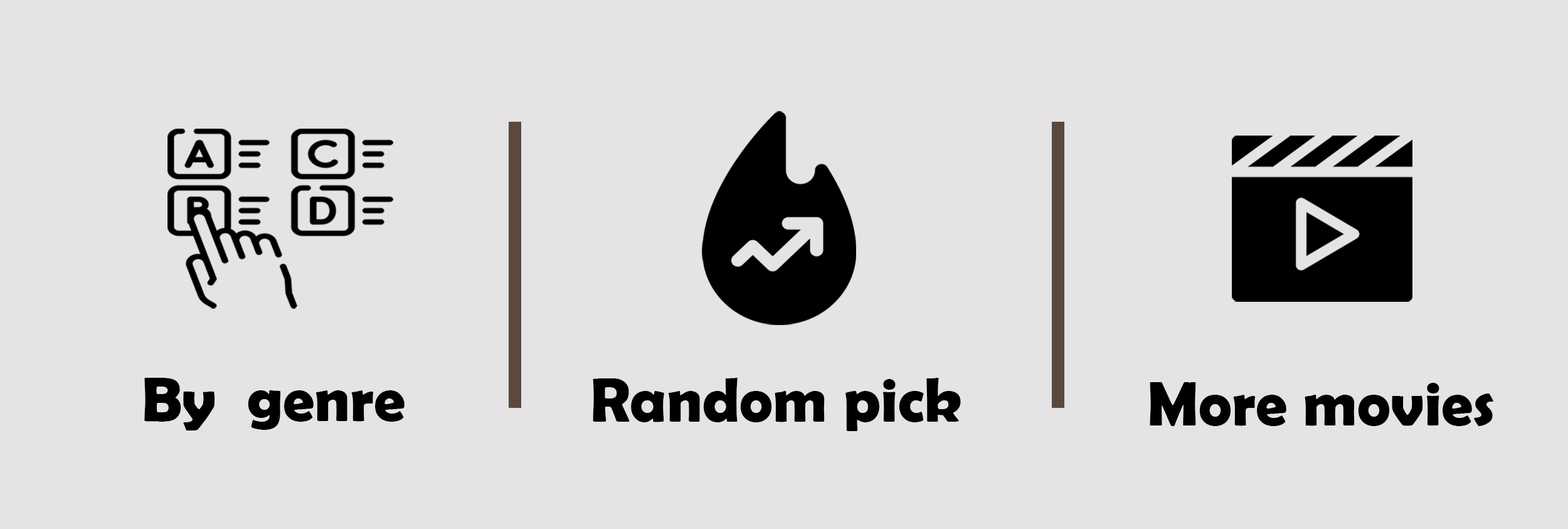
<style>
.page{position:relative;width:1568px;height:529px;background:#e5e3e3}
.page>*{position:absolute;margin:0}
.t1{font:63.4px "BerlinSansFBDemi-Bold";color:#000000}
</style>
<div class="page">
<p class="t1" style="left:144px;top:378px;width:261px;height:52px">By  genre</p>
<p class="t1" style="left:593px;top:378px;width:368px;height:53px">Random pick</p>
<p class="t1" style="left:1150px;top:382px;width:343px;height:44px">More movies</p>
</div>
